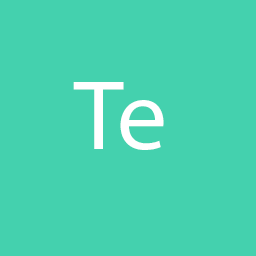
<style>
.page{position:relative;width:256px;height:256px;background:#44d1ae}
.page>*{position:absolute;margin:0}
.t1{font:100px "MyriadPro-Regular";color:#ffffff}
</style>
<div class="page">
<p class="t1" style="left:73px;top:82px;width:91px;height:68px">Te</p>
</div>
